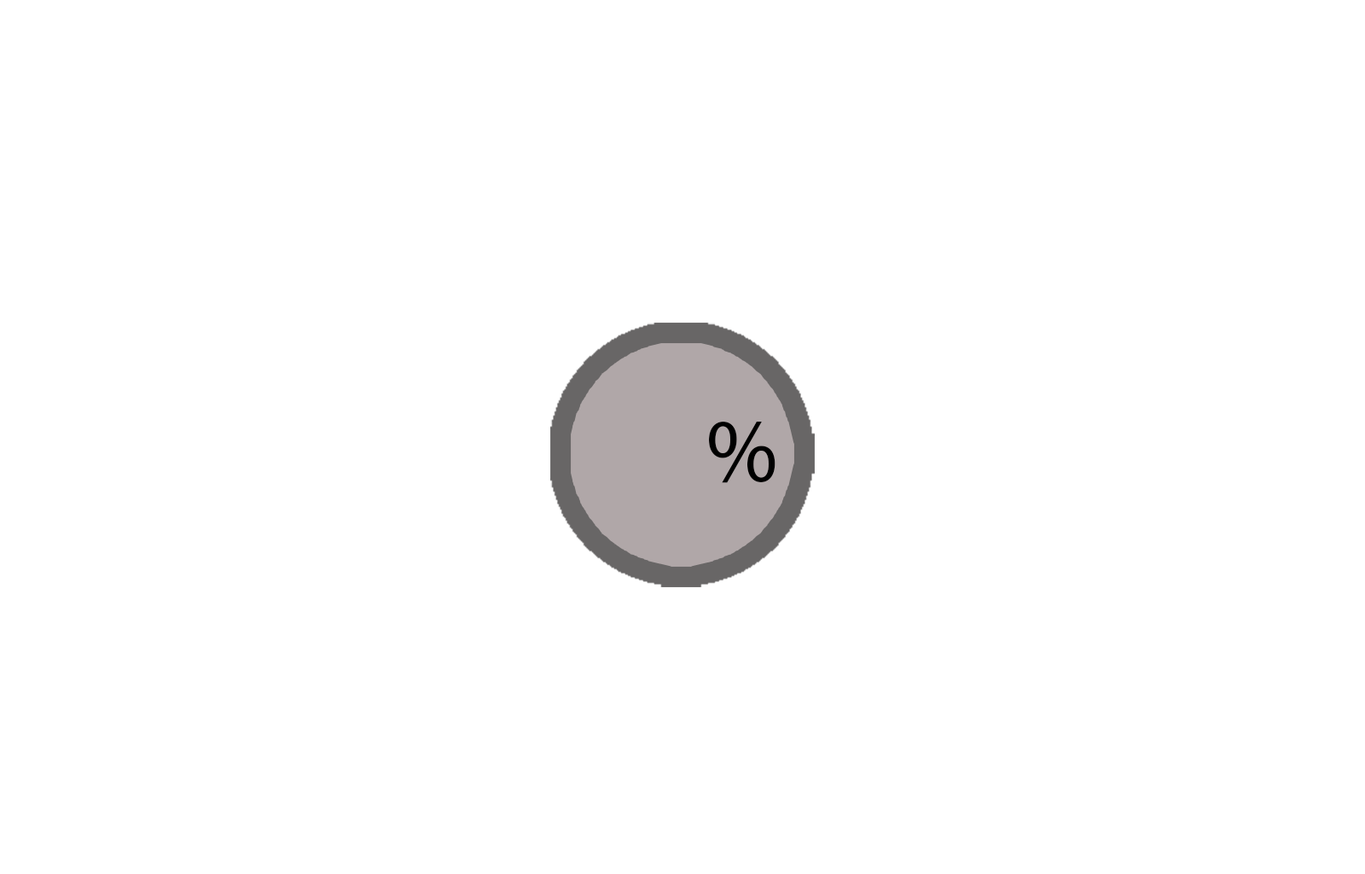
<style>
.page{position:relative;width:1365px;height:874px;background:#ffffff}
.page>*{position:absolute;margin:0}
.t1{font:90px "MyriadPro-Regular";color:#000000}
</style>
<div class="page">
<p class="t1" style="left:709px;top:421px;width:66px;height:62px">%</p>
</div>
